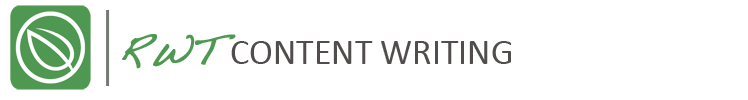
<style>
.page{position:relative;width:748px;height:100px;background:#ffffff}
.page>*{position:absolute;margin:0}
.t1{font:36px "Calibri";color:#514d4d}
.t2{font:40px "Handwriting-Dakota";color:#4f9852;font-weight:bold}
</style>
<div class="page">
<p class="t1" style="left:122px;top:34px;width:390px;height:35px"><span class="t2">RWT </span>CONTENT WRITING</p>
</div>
